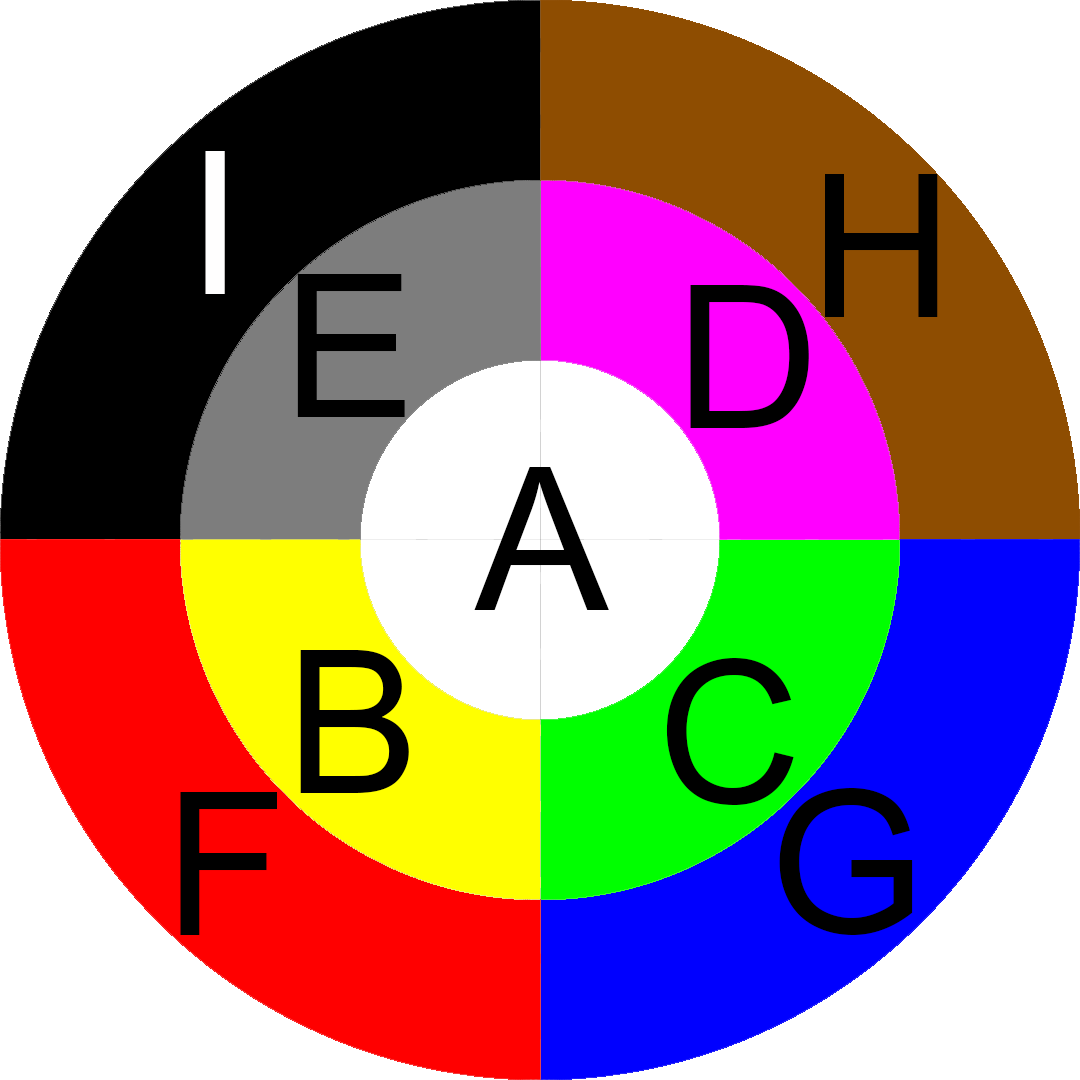
<style>
.page{position:relative;width:1080px;height:1080px;background:#ffffff}
.page>*{position:absolute;margin:0}
.t1{font:200px "ArialMT";color:#fffefe}
.t2{font:200px "ArialMT";color:#000000}
</style>
<div class="page">
<p class="t1" style="left:205px;top:151px;width:20px;height:143px">I</p>
<p class="t2" style="left:825px;top:174px;width:113px;height:143px">H</p>
<p class="t2" style="left:297px;top:274px;width:108px;height:143px">E</p>
<p class="t2" style="left:690px;top:285px;width:119px;height:143px">D</p>
<p class="t2" style="left:474px;top:467px;width:135px;height:143px">A</p>
<p class="t2" style="left:300px;top:650px;width:109px;height:143px">B</p>
<p class="t2" style="left:666px;top:658px;width:128px;height:147px">C</p>
<p class="t2" style="left:180px;top:792px;width:97px;height:143px">F</p>
<p class="t2" style="left:779px;top:788px;width:134px;height:147px">G</p>
</div>
